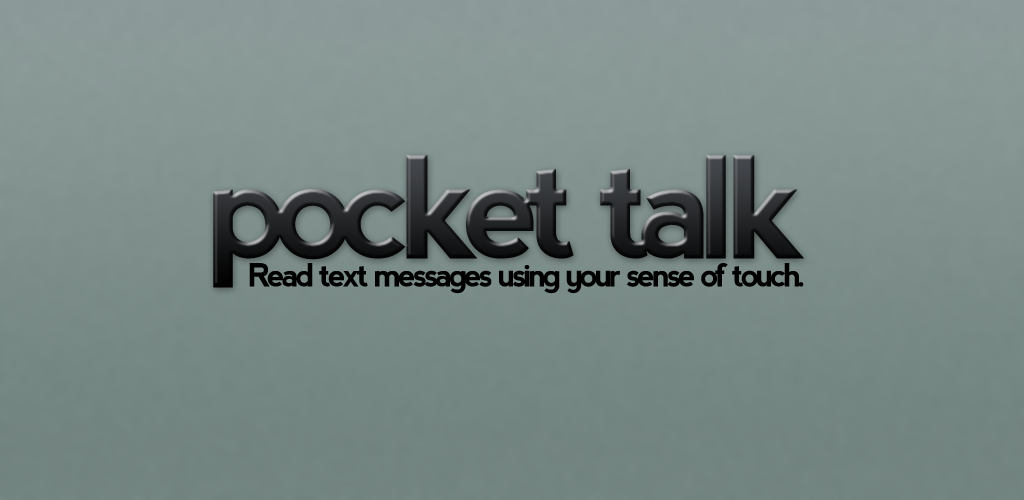
<style>
.page{position:relative;width:1024px;height:500px}
.page>*{position:absolute;margin:0}
.t1{font:140.8px "nevis-Bold";letter-spacing:-0.1em}
.t2{font:140.8px "nevis-Bold";letter-spacing:-0.125em}
.t3{font:32px "nevis-Bold";letter-spacing:-0.1em;color:#000000}
</style>
<div class="page">
<p class="t1" style="left:213px;top:155px;width:591px;height:133px">poc<span class="t2">ke</span>t talk</p>
<p class="t3" style="left:249px;top:263px;width:555px;height:31px">Read text messages using your sense of touch.</p>
</div>
